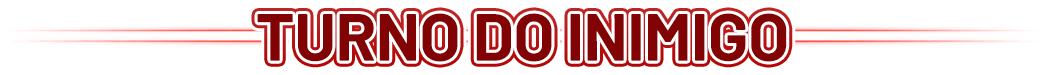
<style>
.page{position:relative;width:1044px;height:75px;background:#ffffff}
.page>*{position:absolute;margin:0}
.t1{font:66.7px "Barlow-Bold";letter-spacing:-0.01em;color:#810303}
</style>
<div class="page">
<p class="t1" style="left:257px;top:13px;width:530px;height:49px">TURNO DO INIMIGO</p>
</div>
